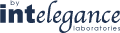
<style>
.page{position:relative;width:120px;height:33px;background:#ffffff}
.page>*{position:absolute;margin:0}
.t1{font:25.3px "Apple-Chancery";color:#1f3250}
.t2{font:25.3px "Arial-Black";color:#1f3250}
.t3{font:6.8px "CenturyGothic";letter-spacing:0.1em}
</style>
<div class="page">
<p class="t1" style="left:0px;top:0px;width:120px;height:33px"><span class="t2">int</span>elegance</p>
<p class="t3" style="left:10px;top:0px;width:10px;height:7px">by</p>
<p class="t3" style="left:73px;top:25px;width:47px;height:6px">laboratories</p>
</div>
